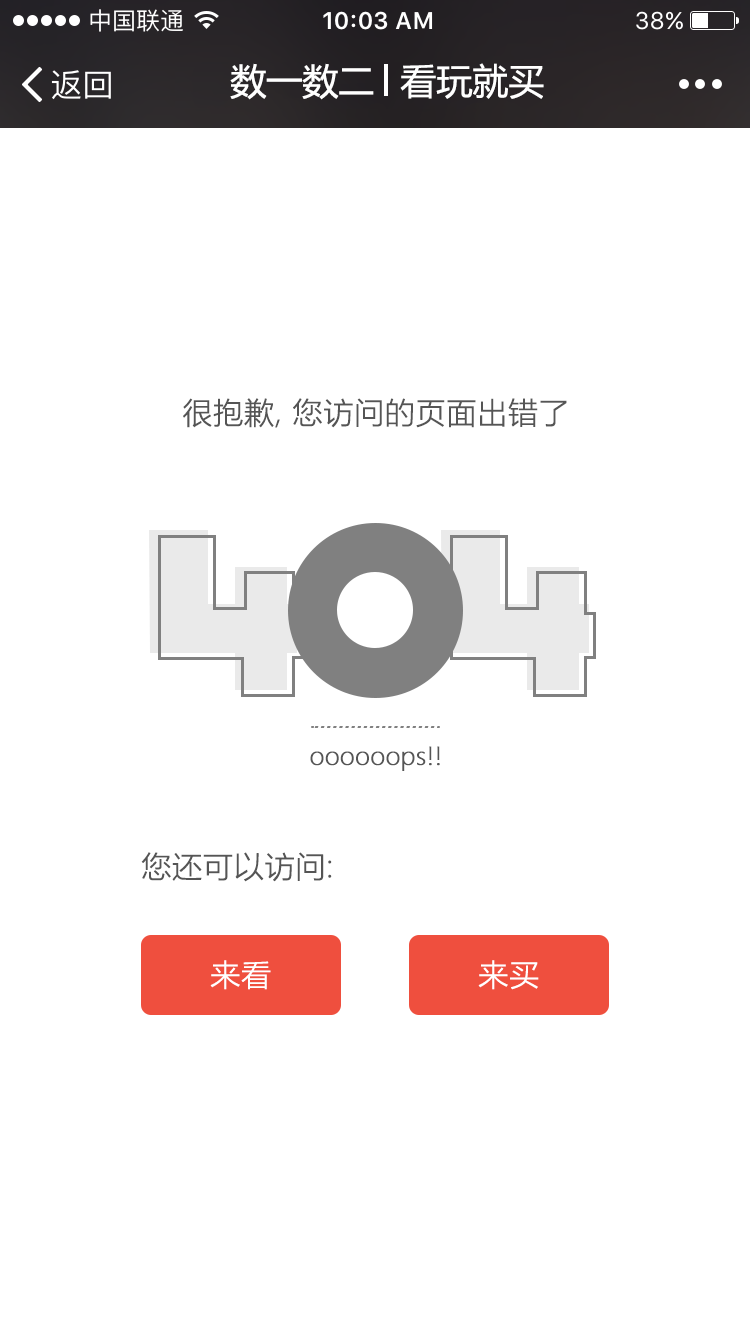
<style>
.page{position:relative;width:750px;height:1334px;background:#ffffff}
.page>*{position:absolute;margin:0}
.t1{font:36px "MicrosoftYaHei";color:#ffffff}
.t2{font:30px "MicrosoftYaHeiLight";color:#555555;font-weight:bold}
.t3{font:24px "MicrosoftYaHeiLight";color:#555555;font-weight:bold}
.t4{font:30px "MicrosoftYaHeiLight";color:#ffffff;font-weight:bold}
</style>
<div class="page">
<p class="t1" style="left:230px;top:63px;width:144px;height:37px">数一数二</p>
<p class="t1" style="left:400px;top:63px;width:144px;height:36px">看玩就买</p>
<p class="t2" style="left:183px;top:398px;width:384px;height:30px">很抱歉, 您访问的页面出错了</p>
<p class="t3" style="left:310px;top:746px;width:130px;height:25px">oooooops!!</p>
<p class="t2" style="left:141px;top:852px;width:191px;height:30px">您还可以访问:</p>
<p class="t4" style="left:210px;top:960px;width:61px;height:30px">来看</p>
<p class="t4" style="left:478px;top:960px;width:61px;height:30px">来买</p>
</div>
